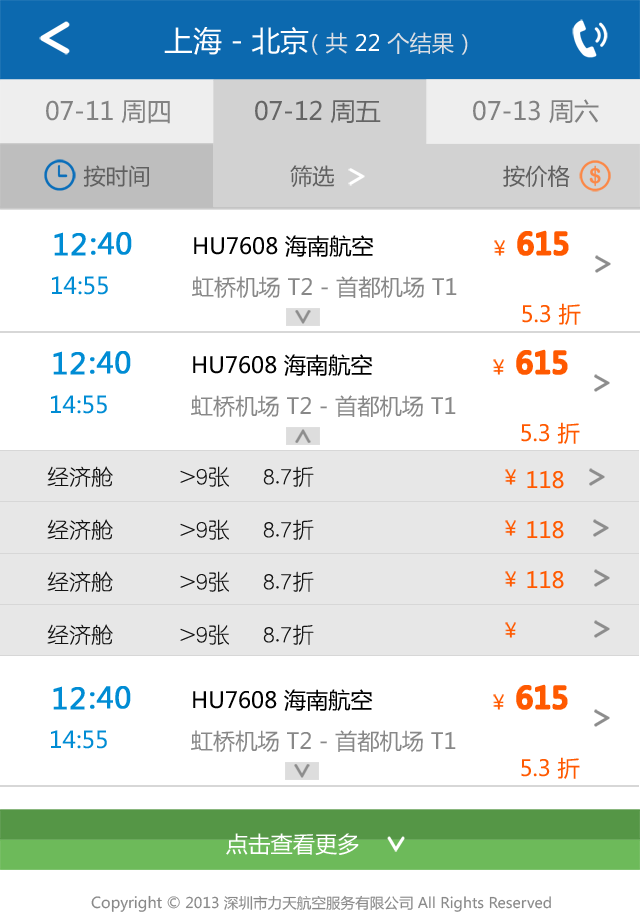
<style>
.page{position:relative;width:640px;height:916px;background:#ffffff}
.page>*{position:absolute;margin:0}
.t1{font:28.8px "MicrosoftYaHei";color:#ffffff}
.t2{font:22.3px "MicrosoftYaHei";color:#dcdfe4}
.t3{font:22.3px "MicrosoftYaHei";color:#ffffff}
.t4{font:25px "MicrosoftYaHei";color:#838383}
.t5{font:25px "MicrosoftYaHei";color:#656565}
.t6{font:25px "MicrosoftYaHei";color:#818181}
.t7{font:22.3px "MicrosoftYaHei";color:#606060}
.t8{font:25px "MicrosoftYaHei";color:#606060}
.t9{font:28.8px "MicrosoftYaHei";color:#008cd4;font-weight:bold}
.t10{font:28.8px "MicrosoftYaHei";color:#ff5900;font-weight:bold}
.t11{font:28.6px "MicrosoftYaHei";color:#008cd4;font-weight:bold}
.t12{font:22.3px "MicrosoftYaHei";color:#000000}
.t13{font:23px "MicrosoftYaHei";color:#008cd4}
.t14{font:22.3px "MicrosoftYaHei";color:#888888}
.t15{font:22.3px "MicrosoftYaHei";color:#ff5900}
.t16{font:22px "Tensentype-JiaLiXianYuanF";color:#141414}
.t17{font:14.6px "MicrosoftYaHei";color:#898989}
.t18{font:15px "MicrosoftYaHei";color:#898989}
</style>
<div class="page">
<p class="t1" style="left:164px;top:27px;width:145px;height:28px">上海 - 北京</p>
<p class="t2" style="left:312px;top:32px;width:156px;height:23px">（共 <span class="t3">22 </span>个结果）</p>
<p class="t4" style="left:46px;top:100px;width:124px;height:24px">07-11 周四</p>
<p class="t5" style="left:255px;top:100px;width:126px;height:24px">07-12 周五</p>
<p class="t6" style="left:473px;top:99px;width:126px;height:25px">07-13 周六</p>
<p class="t7" style="left:83px;top:165px;width:66px;height:22px"><span class="t8"> </span>按时间</p>
<p class="t7" style="left:290px;top:165px;width:45px;height:22px"><span class="t8"> </span>筛选</p>
<p class="t7" style="left:503px;top:165px;width:67px;height:22px"><span class="t8"> </span>按价格</p>
<p class="t9" style="left:54px;top:232px;width:32px;height:24px">12</p>
<p class="t9" style="left:97px;top:232px;width:35px;height:23px">40</p>
<p class="t10" style="left:518px;top:231px;width:50px;height:24px">615</p>
<p class="t11" style="left:91px;top:238px;width:5px;height:17px">：</p>
<p class="t12" style="left:194px;top:235px;width:180px;height:22px">HU7608 海南航空</p>
<p class="t13" style="left:52px;top:276px;width:25px;height:18px">14</p>
<p class="t13" style="left:78px;top:281px;width:4px;height:14px">：</p>
<p class="t13" style="left:84px;top:276px;width:24px;height:19px">55</p>
<p class="t14" style="left:192px;top:276px;width:265px;height:22px">虹桥机场 T2 - 首都机场 T1</p>
<p class="t15" style="left:522px;top:303px;width:59px;height:22px">5.3 折</p>
<p class="t9" style="left:53px;top:351px;width:32px;height:24px">12</p>
<p class="t9" style="left:96px;top:351px;width:35px;height:23px">40</p>
<p class="t10" style="left:517px;top:350px;width:50px;height:24px">615</p>
<p class="t11" style="left:90px;top:357px;width:5px;height:17px">：</p>
<p class="t12" style="left:193px;top:354px;width:180px;height:22px">HU7608 海南航空</p>
<p class="t13" style="left:51px;top:395px;width:25px;height:18px">14</p>
<p class="t13" style="left:77px;top:400px;width:4px;height:14px">：</p>
<p class="t13" style="left:83px;top:395px;width:24px;height:19px">55</p>
<p class="t14" style="left:191px;top:395px;width:265px;height:22px">虹桥机场 T2 - 首都机场 T1</p>
<p class="t15" style="left:521px;top:422px;width:59px;height:22px">5.3 折</p>
<p class="t16" style="left:47px;top:466px;width:267px;height:21px">经济舱      &gt;9张   8.7折</p>
<p class="t15" style="left:527px;top:470px;width:37px;height:19px">118</p>
<p class="t16" style="left:47px;top:519px;width:267px;height:21px">经济舱      &gt;9张   8.7折</p>
<p class="t15" style="left:527px;top:520px;width:37px;height:19px">118</p>
<p class="t16" style="left:47px;top:571px;width:267px;height:21px">经济舱      &gt;9张   8.7折</p>
<p class="t15" style="left:527px;top:570px;width:37px;height:19px">118</p>
<p class="t16" style="left:47px;top:624px;width:267px;height:21px">经济舱      &gt;9张   8.7折</p>
<p class="t9" style="left:53px;top:686px;width:32px;height:24px">12</p>
<p class="t9" style="left:96px;top:686px;width:35px;height:23px">40</p>
<p class="t12" style="left:193px;top:689px;width:180px;height:22px">HU7608 海南航空</p>
<p class="t10" style="left:517px;top:685px;width:50px;height:24px">615</p>
<p class="t11" style="left:90px;top:692px;width:5px;height:17px">：</p>
<p class="t13" style="left:51px;top:730px;width:25px;height:18px">14</p>
<p class="t13" style="left:77px;top:735px;width:4px;height:14px">：</p>
<p class="t13" style="left:83px;top:730px;width:24px;height:19px">55</p>
<p class="t14" style="left:191px;top:730px;width:265px;height:22px">虹桥机场 T2 - 首都机场 T1</p>
<p class="t15" style="left:521px;top:757px;width:59px;height:22px">5.3 折</p>
<p class="t3" style="left:226px;top:833px;width:133px;height:22px">点击查看更多</p>
<p class="t17" style="left:91px;top:895px;width:460px;height:17px"><span class="t18">Copyright ©</span> 2013 深圳市力天航空服务有限公司 All Rights Reserved</p>
</div>
